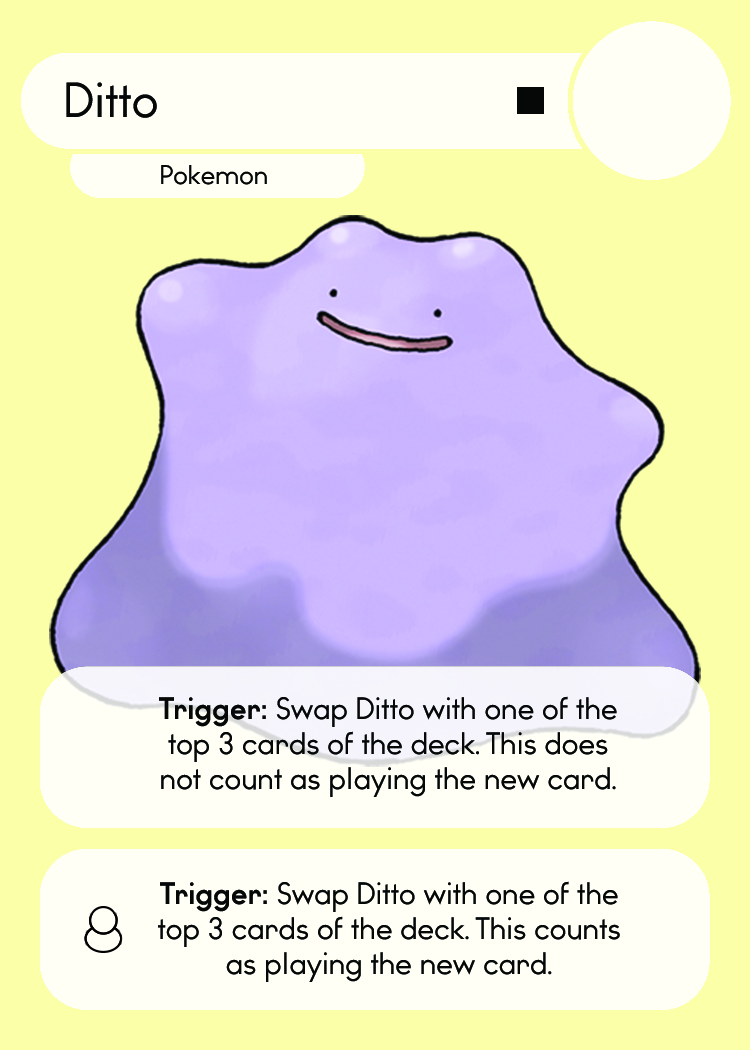
<style>
.page{position:relative;width:750px;height:1050px;background:#fbffa8}
.page>*{position:absolute;margin:0}
.t1{font:46.7px "WatchwordRegularDemo";color:#060808}
.t2{font:25.5px "WatchwordRegularDemo";color:#060808}
.t3{font:29.2px "WatchwordRegularDemo";color:#060808}
.t4{font:29.2px "WatchwordBoldDemo";color:#060808}
.t5{font:29.2px "Dosis-Medium";color:#060808}
</style>
<div class="page">
<p class="t1" style="left:66px;top:82px;width:91px;height:36px">Ditto</p>
<p class="t2" style="left:161px;top:165px;width:106px;height:20px">Pokemon</p>
<p class="t3" style="left:159px;top:696px;width:458px;height:101px;text-align:center"><span class="t4">Trigger: </span>Swap Ditto with one of the<br>top 3 cards of the deck<span class="t5">. </span>This does<br>not count as playing the new card<span class="t5">.</span></p>
<p class="t3" style="left:158px;top:881px;width:462px;height:101px;text-align:center"><span class="t4">Trigger: </span>Swap Ditto with one of the<br>top 3 cards of the deck<span class="t5">. </span>This counts<br>as playing the new card<span class="t5">.</span></p>
</div>
